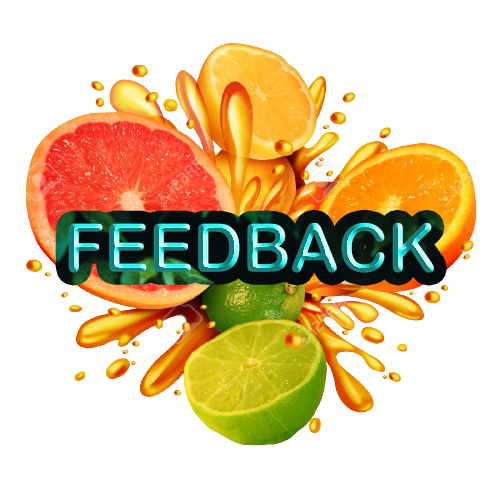
<style>
.page{position:relative;width:500px;height:500px;background:#ffffff}
.page>*{position:absolute;margin:0}
.t1{font:66.7px "ArialRoundedMTBold"}
</style>
<div class="page">
<p class="t1" style="left:68px;top:222px;width:366px;height:51px">FEEDBACK</p>
</div>
